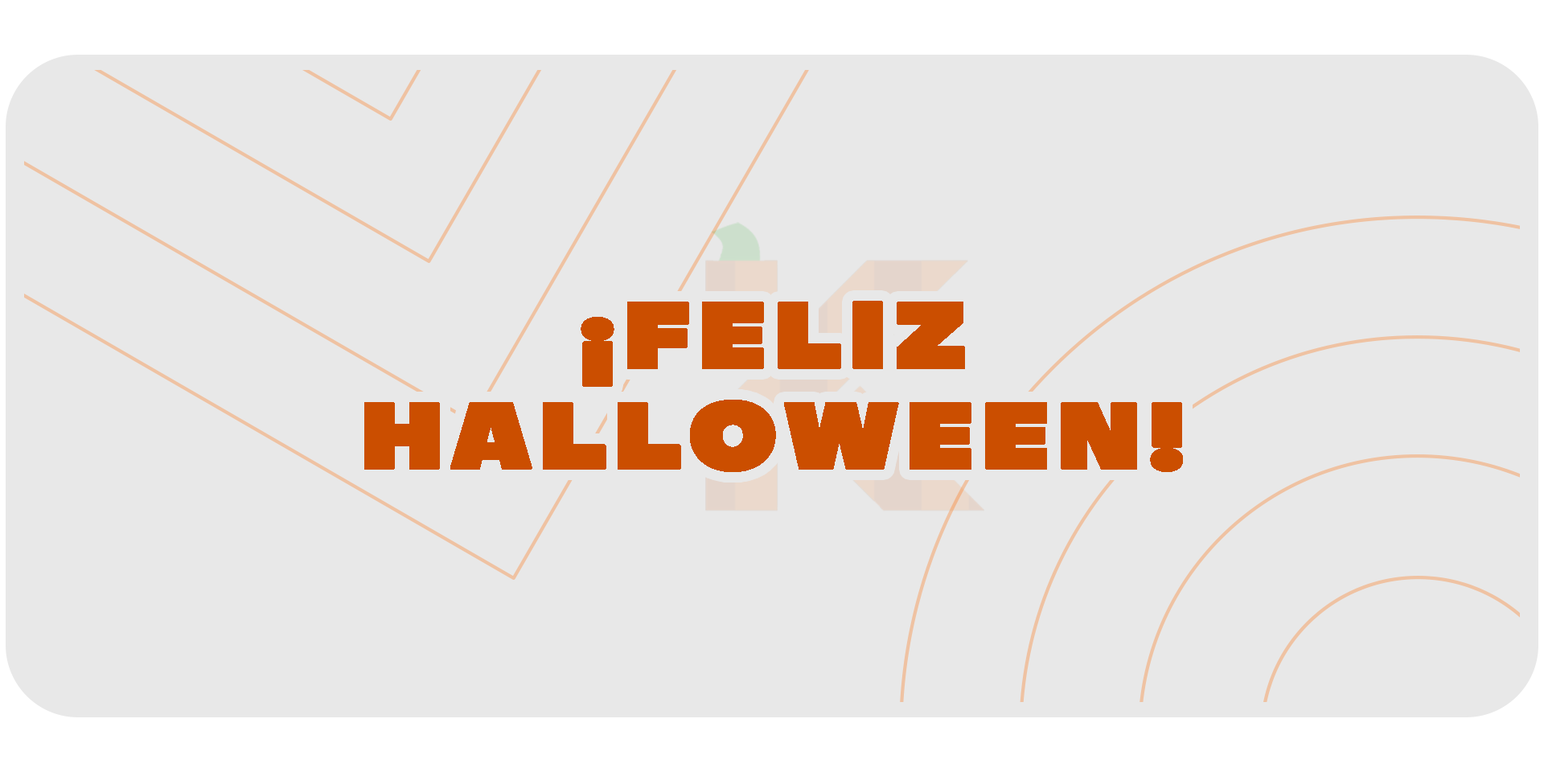
<style>
.page{position:relative;width:1544px;height:772px;background:#e8e8e8}
.page>*{position:absolute;margin:0}
.t1{font:93px "DiscordRegular";letter-spacing:0.08em;color:#cb4e00;font-weight:bold;scale:0.91 1}
</style>
<div class="page">
<p class="t1" style="left:364px;top:301px;width:819px;height:171px;text-align:center">¡FELIZ<br>HALLOWEEN!</p>
</div>
